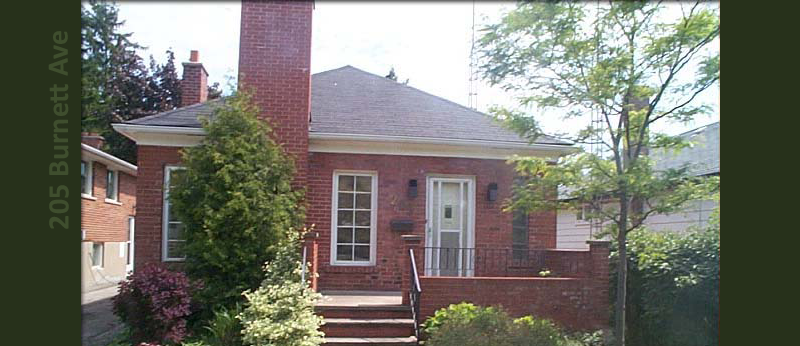
<style>
.page{position:relative;width:800px;height:346px}
.page>*{position:absolute;margin:0}
.t1{font:30px "Calibri-Bold";color:#3f4e2e}
</style>
<div class="page">
<p class="t1" style="left:48px;top:31px;width:21px;height:198px;rotate:-90deg">205 Burnett Ave</p>
</div>
